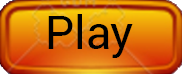
<style>
.page{position:relative;width:182px;height:74px}
.page>*{position:absolute;margin:0}
.t1{font:45.5px "Roboto-Regular";color:#000000}
</style>
<div class="page">
<p class="t1" style="left:48px;top:14px;width:85px;height:44px">Play</p>
</div>
